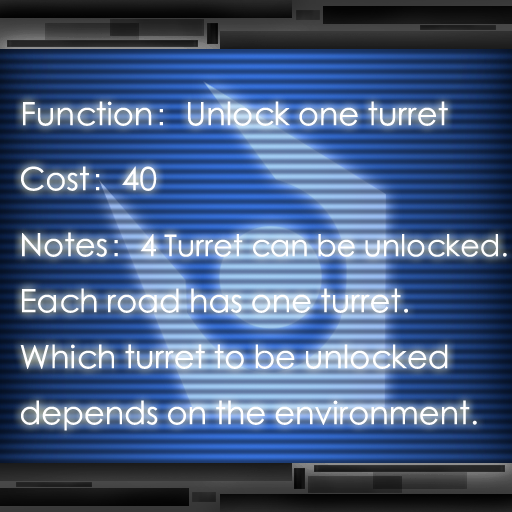
<style>
.page{position:relative;width:512px;height:512px}
.page>*{position:absolute;margin:0}
.t1{font:32px "STXihei";color:#ffffff}
.t2{font:30px "STXihei";color:#ffffff}
</style>
<div class="page">
<p class="t1" style="left:23px;top:101px;width:425px;height:25px">Function：Unlock one turret</p>
<p class="t1" style="left:21px;top:166px;width:136px;height:25px">Cost：40</p>
<p class="t1" style="left:20px;top:232px;width:487px;height:199px">Notes：<span class="t2">4 Turret can be unlocked.<br></span>Each road has one turret.<br>Which turret to be unlocked<br>depends on the environment.</p>
</div>
